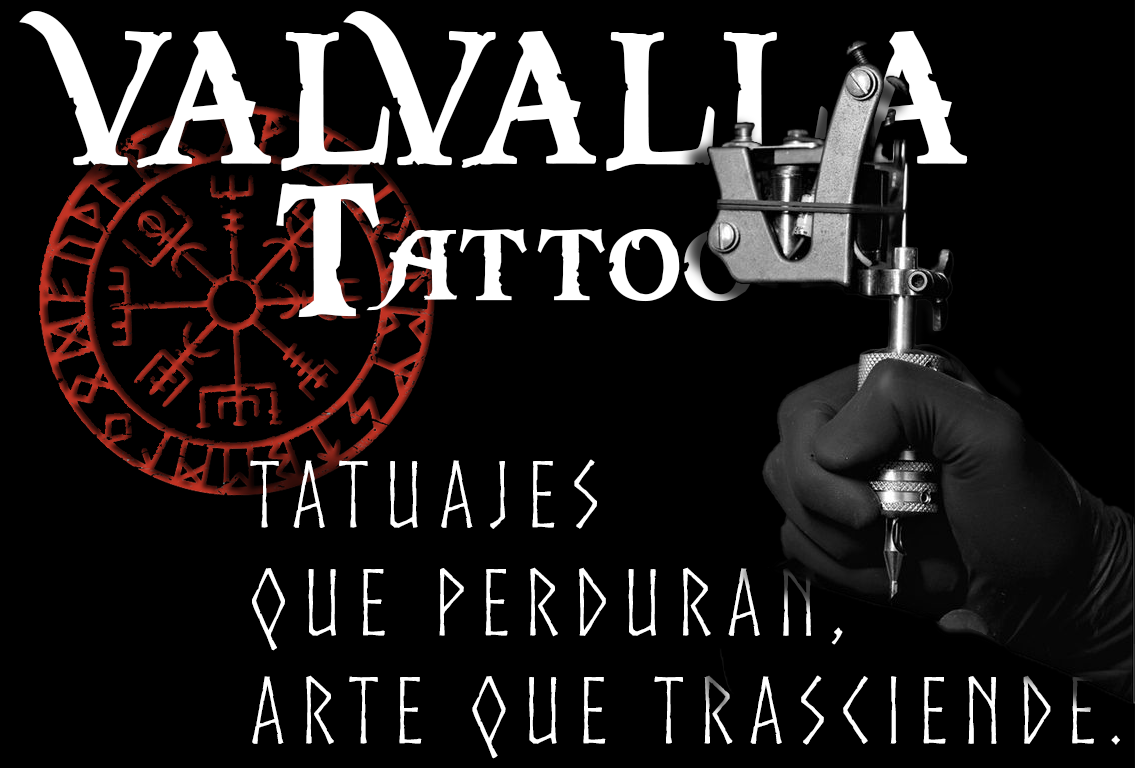
<style>
.page{position:relative;width:1135px;height:768px;background:#000000}
.page>*{position:absolute;margin:0}
.t1{font:200px "PiecesofEight";color:#ffffff}
.t2{font:90px "Norse";letter-spacing:0.15em;color:#ffffff}
</style>
<div class="page">
<p class="t1" style="left:19px;top:11px;width:949px;height:160px">VALVALLA</p>
<p class="t1" style="left:276px;top:183px;width:479px;height:134px">Tattoo</p>
<p class="t2" style="left:250px;top:459px;width:870px;height:300px">tatuajes<br>que perduran,<br>arte que trasciende.</p>
</div>
